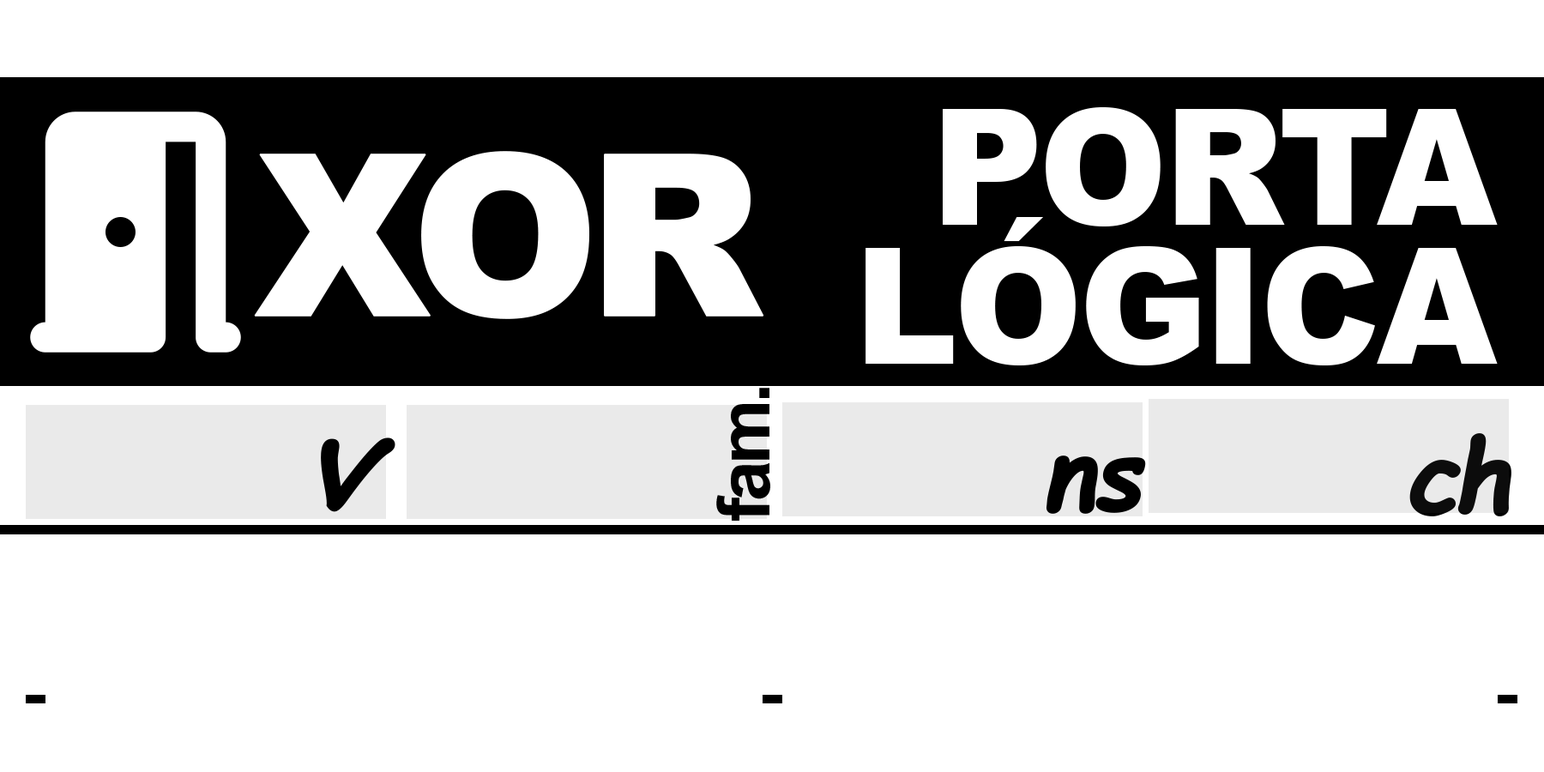
<style>
.page{position:relative;width:1544px;height:772px;background:#ffffff}
.page>*{position:absolute;margin:0}
.t1{font:162.5px/138.5px "Arial-Black";letter-spacing:-0.025em;color:#ffffff;scale:0.95 1}
.t2{font:225px "Arial-Black";letter-spacing:-0.075em;color:#ffffff;font-weight:bold}
.t3{font:72.6px "Arial-BoldMT";letter-spacing:-0.05em;color:#000000}
.t4{font:127.1px "SegoePrint-Bold";letter-spacing:-0.15em;color:#000000;font-weight:bold;font-style:italic}
.t5{font:99.9px "ComicSansMS-Bold";letter-spacing:-0.075em;color:#000000;font-weight:bold;font-style:italic}
.t6{font:99.9px "ComicSansMS-Bold";letter-spacing:-0.05em;color:#000000;font-weight:bold;font-style:italic}
.t7{font:127.1px "ComicSansMS-Bold";letter-spacing:-0.05em;color:#000000;font-style:italic}
</style>
<div class="page">
<p class="t1" style="left:866px;top:107px;width:632px;height:258px;text-align:right">PORTA<br>LÓGICA</p>
<p class="t2" style="left:254px;top:151px;width:510px;height:168px">XOR</p>
<p class="t3" style="left:716px;top:388px;width:54px;height:133px;rotate:-90deg">fam.</p>
<p class="t4" style="left:321px;top:438px;width:75px;height:74px">v</p>
<p class="t5" style="left:1410px;top:433px;width:102px;height:83px">ch</p>
<p class="t6" style="left:1046px;top:456px;width:100px;height:58px"><span class="t7"> </span>ns</p>
</div>
